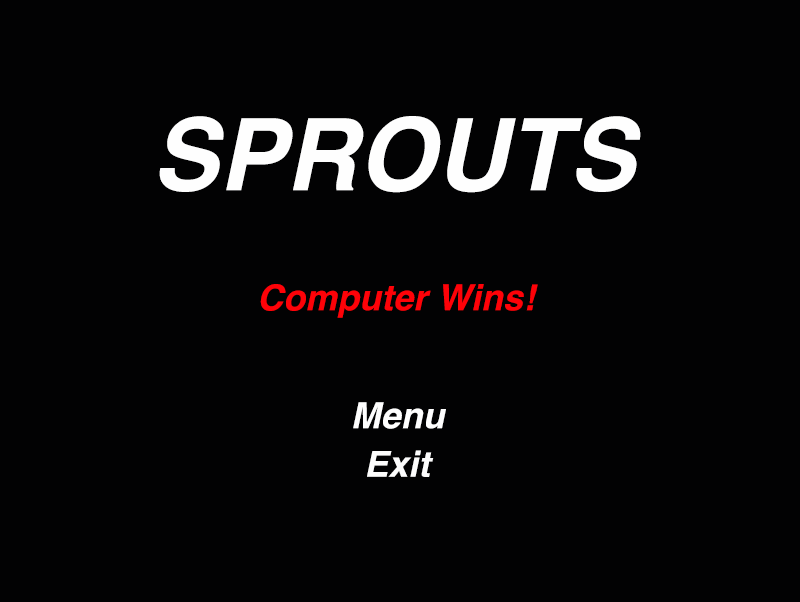
<style>
.page{position:relative;width:800px;height:602px;background:#020203}
.page>*{position:absolute;margin:0}
.t1{font:100px "Helvetica-BoldOblique";color:#fefefe}
.t2{font:36px "Helvetica-BoldOblique";color:#fe0208}
.t3{font:36px "Helvetica-BoldOblique";color:#fefefe}
.t4{font:36px "Helvetica-BoldOblique";color:#fcfcfc}
</style>
<div class="page">
<p class="t1" style="left:159px;top:116px;width:482px;height:77px">SPROUTS</p>
<p class="t2" style="left:260px;top:284px;width:278px;height:34px">Computer Wins!</p>
<p class="t3" style="left:353px;top:402px;width:93px;height:27px">Menu</p>
<p class="t4" style="left:367px;top:450px;width:67px;height:27px">Exit</p>
</div>
